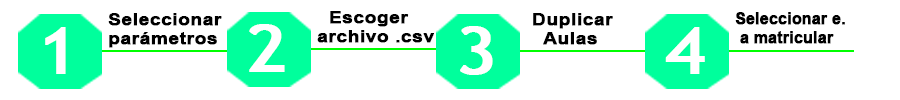
<style>
.page{position:relative;width:900px;height:100px;background:#ffffff}
.page>*{position:absolute;margin:0}
.t1{font:15.6px "Arial-BoldMT";color:#000000;font-weight:bold;scale:1.23 1}
.t2{font:15.6px "Arial-BoldMT";color:#000000;font-weight:bold}
.t3{font:64.5px "TrebuchetMS";color:#ffffff;font-weight:bold;scale:1.16 1}
</style>
<div class="page">
<p class="t1" style="left:108px;top:13px;width:114px;height:35px">Seleccionar<br>parámetros</p>
<p class="t1" style="left:317px;top:11px;width:117px;height:32px">Escoger<br>archivo .csv</p>
<p class="t1" style="left:533px;top:13px;width:80px;height:32px">Duplicar<br>   Aulas</p>
<p class="t2" style="left:735px;top:12px;width:110px;height:32px">Seleccionar e.<br> a matricular</p>
<p class="t3" style="left:45px;top:27px;width:21px;height:47px">1</p>
<p class="t3" style="left:249px;top:24px;width:36px;height:48px">2</p>
<p class="t3" style="left:460px;top:26px;width:33px;height:49px">3</p>
<p class="t3" style="left:665px;top:27px;width:40px;height:47px">4</p>
</div>
